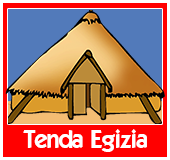
<style>
.page{position:relative;width:170px;height:160px;background:#ff0000}
.page>*{position:absolute;margin:0}
.t1{font:24px "ELEGANCE";color:#ffffff}
</style>
<div class="page">
<p class="t1" style="left:23px;top:129px;width:124px;height:23px">Tenda Egizia</p>
</div>
